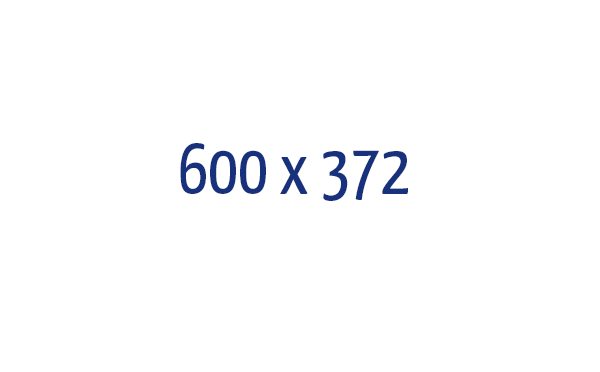
<style>
.page{position:relative;width:600px;height:372px;background:#ffffff}
.page>*{position:absolute;margin:0}
.t1{font:72px "YanoneKaffeesatz-Regular";color:#17317c}
</style>
<div class="page">
<p class="t1" style="left:180px;top:143px;width:228px;height:58px">600 x 372</p>
</div>
